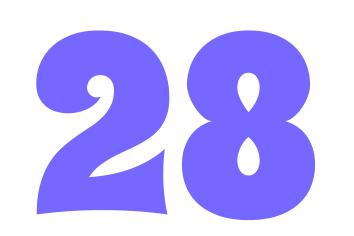
<style>
.page{position:relative;width:354px;height:236px;background:#ffffff}
.page>*{position:absolute;margin:0}
.t1{font:250px "SpicyRice-Regular";color:#7668ff}
</style>
<div class="page">
<p class="t1" style="left:36px;top:30px;width:280px;height:191px">28</p>
</div>
